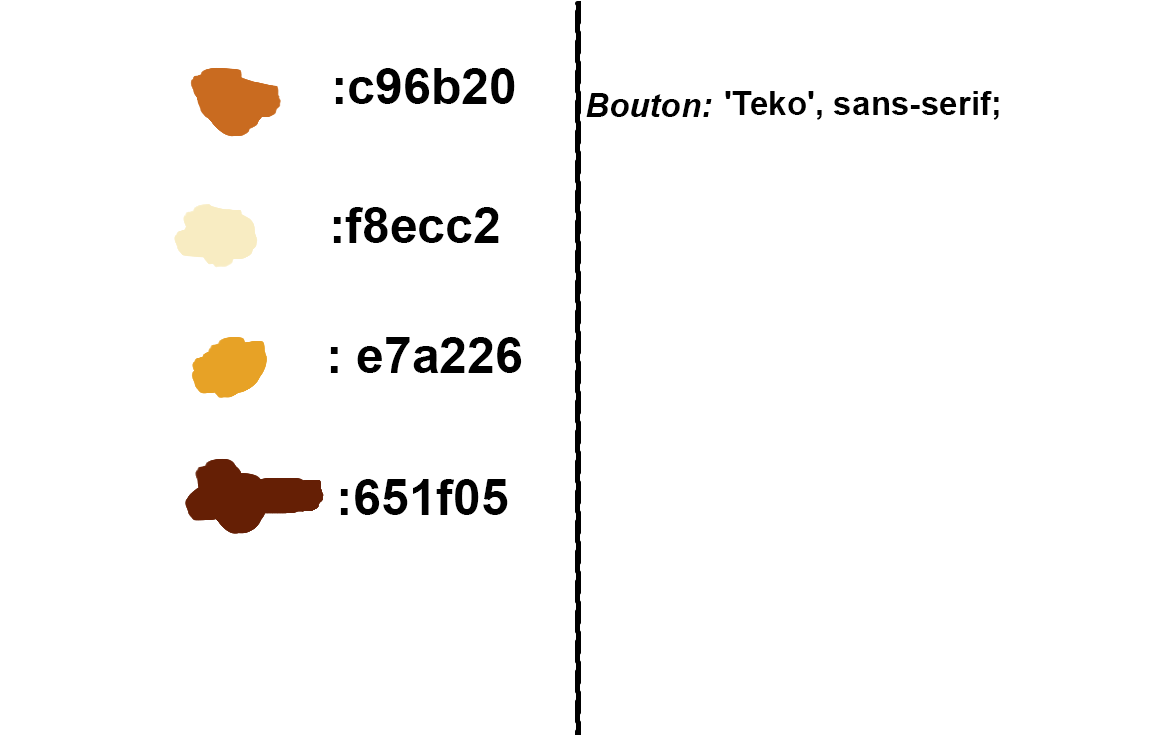
<style>
.page{position:relative;width:1175px;height:735px;background:#ffffff}
.page>*{position:absolute;margin:0}
.t1{font:50px "Arial-BoldMT";color:#000000}
.t2{font:33.3px "Arial-BoldItalicMT";color:#000000}
.t3{font:33.3px "Arial-BoldMT";color:#000000}
</style>
<div class="page">
<p class="t1" style="left:335px;top:68px;width:180px;height:36px">:c96b20</p>
<p class="t2" style="left:586px;top:93px;width:126px;height:24px">Bouton:</p>
<p class="t3" style="left:725px;top:91px;width:274px;height:29px">'Teko', sans-serif;</p>
<p class="t1" style="left:333px;top:207px;width:166px;height:36px">:f8ecc2</p>
<p class="t1" style="left:330px;top:337px;width:192px;height:36px">: e7a226</p>
<p class="t1" style="left:340px;top:479px;width:168px;height:36px">:651f05</p>
</div>
